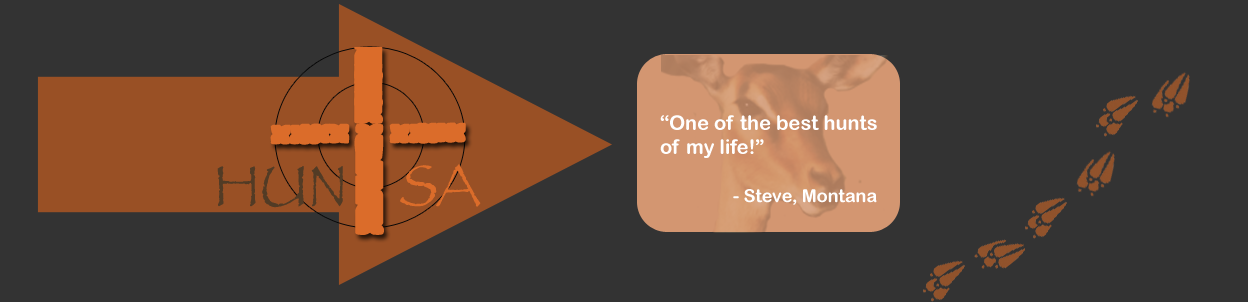
<style>
.page{position:relative;width:1248px;height:302px;background:#333333}
.page>*{position:absolute;margin:0}
.t1{font:20px "ArialRoundedMTBold";color:#ffffff}
.t2{font:18px "Papyrus";color:#ffffff}
.t3{font:60px "Papyrus";color:#523b25}
.t4{font:60px "Papyrus";color:#db6c2a}
.t5{font:18px "ArialRoundedMTBold";color:#ffffff}
</style>
<div class="page">
<p class="t1" style="left:660px;top:115px;width:217px;height:43px"><span class="t2"><br></span>“One of the best hunts<br>of my life!”</p>
<p class="t3" style="left:217px;top:166px;width:126px;height:42px">HUN</p>
<p class="t4" style="left:400px;top:164px;width:81px;height:43px">SA</p>
<p class="t5" style="left:733px;top:189px;width:144px;height:16px">- Steve, Montana</p>
</div>
